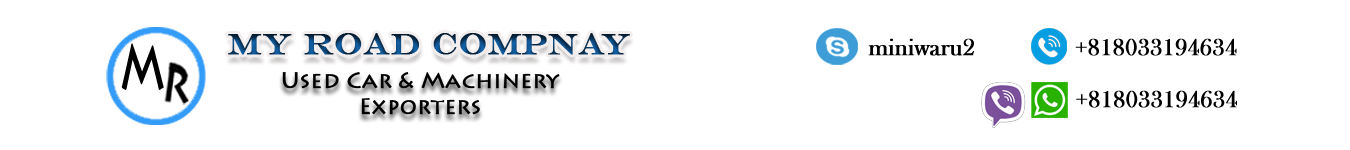
<style>
.page{position:relative;width:1350px;height:150px;background:#ffffff}
.page>*{position:absolute;margin:0}
.t1{font:24px "BaskOldFace";color:#000000;font-weight:bold}
.t2{font:60px "LithosPro-Regular";color:#000000;font-weight:bold;scale:0.67 1}
.t3{font:22px "LithosPro-Regular";color:#000000;font-weight:bold}
</style>
<div class="page">
<p class="t1" style="left:868px;top:38px;width:106px;height:18px">miniwaru2</p>
<p class="t1" style="left:1075px;top:38px;width:162px;height:18px">+818033194634</p>
<p class="t2" style="left:121px;top:43px;width:43px;height:47px">M</p>
<p class="t3" style="left:282px;top:72px;width:278px;height:43px;text-align:center">Used Car &amp; Machinery<br>Exporters</p>
<p class="t1" style="left:1076px;top:90px;width:161px;height:18px">+818033194634</p>
</div>
